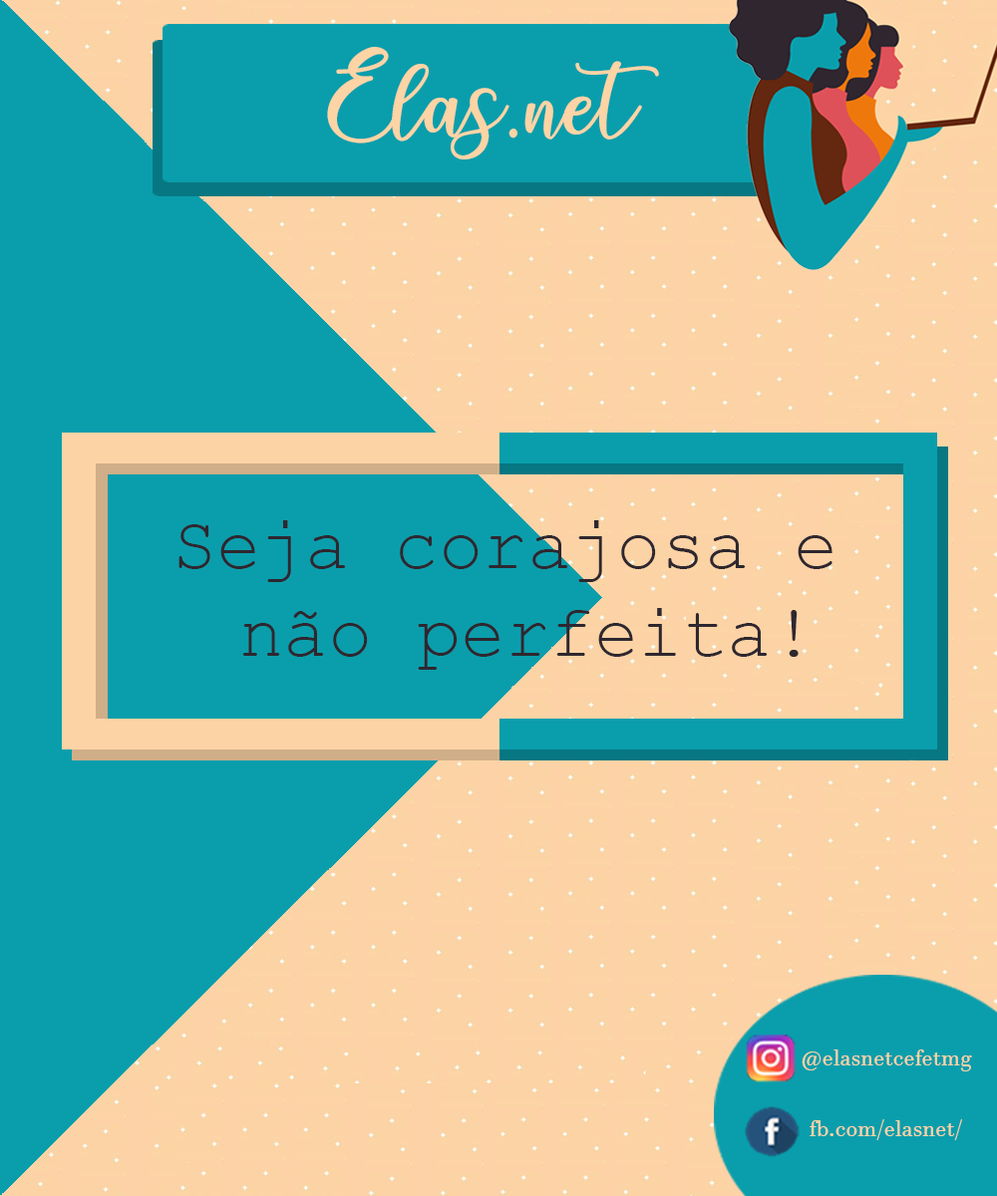
<style>
.page{position:relative;width:997px;height:1196px;background:#0a9eac}
.page>*{position:absolute;margin:0}
.t1{font:89.1px "charlinda-Regular";color:#fcd4a5}
.t2{font:73.9px "CourierNewPSMT";color:#2e272f}
.t3{font:23.3px "JavaneseText";color:#fdd3a6}
</style>
<div class="page">
<p class="t1" style="left:327px;top:47px;width:332px;height:112px">Elas.net</p>
<p class="t2" style="left:178px;top:520px;width:654px;height:150px;text-align:center">Seja corajosa e <br>não perfeita!</p>
<p class="t3" style="left:801px;top:1050px;width:171px;height:22px">@elasnetcefetmg</p>
<p class="t3" style="left:809px;top:1119px;width:153px;height:21px">fb.com/elasnet/</p>
</div>
